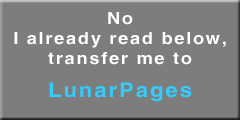
<style>
.page{position:relative;width:240px;height:120px;background:#7d7d7d}
.page>*{position:absolute;margin:0}
.t1{font:16.7px "SwitzerlandBold";letter-spacing:0.1em;color:#ffffff;scale:1.1 1}
.t2{font:20px/16.7px "SwitzerlandBold";letter-spacing:0.1em;color:#33ccff;scale:1.1 1}
</style>
<div class="page">
<p class="t1" style="left:14px;top:12px;width:212px;height:90px;text-align:center">No<br>I already read below,<br>transfer me to<br><br><span class="t2">LunarPages</span></p>
</div>
